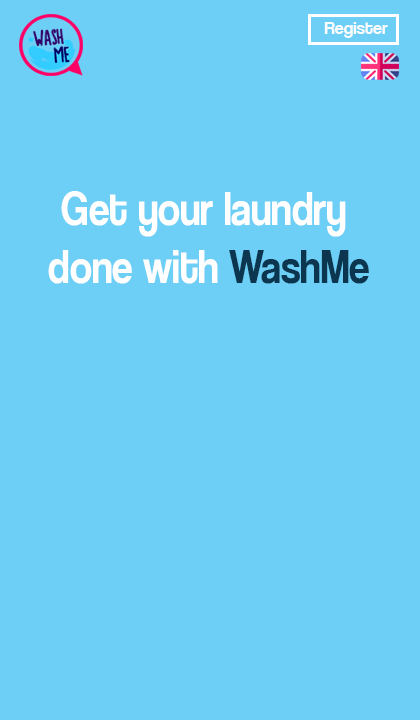
<style>
.page{position:relative;width:420px;height:720px;background:#6dcff6}
.page>*{position:absolute;margin:0}
.t1{font:18px "CoolveticaRg-Regular";color:#fbfdfe}
.t2{font:48px "CoolveticaRg-Regular";color:#ffffff;scale:0.86 1}
.t3{font:48px "CoolveticaRg-Regular";color:#0c354f;scale:0.86 1}
</style>
<div class="page">
<p class="t1" style="left:324px;top:22px;width:64px;height:16px">Register</p>
<p class="t2" style="left:48px;top:191px;width:321px;height:93px;text-align:center">Get your laundry <br>done with <span class="t3">WashMe</span></p>
</div>
